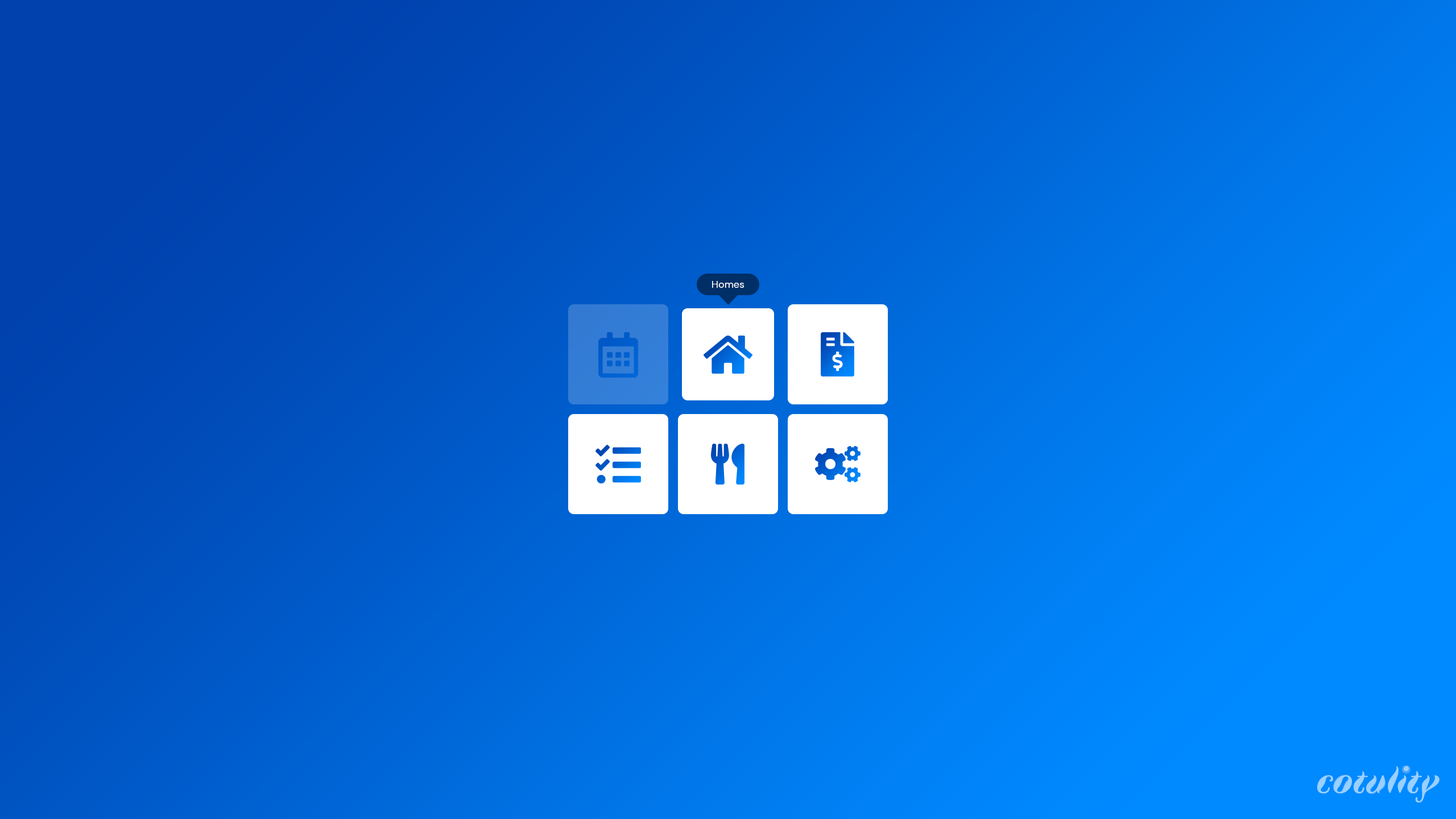
<style>
.page{position:relative;width:1456px;height:819px}
.page>*{position:absolute;margin:0}
.t1{font:10.2px "DMSans-Regular";color:#ffffff}
.t2{font:36.9px "Faune-DisplayBoldItalic";color:#99d0ff}
.t3{font:16.6px "Faune-DisplayBlack"}
</style>
<div class="page">
<p class="t1" style="left:712px;top:281px;width:32px;height:7px">Homes</p>
<p class="t2" style="left:1317px;top:766px;width:122px;height:36px">cotulity</p>
<p class="t3" style="left:1402px;top:765px;width:8px;height:8px;rotate:90deg">o</p>
<p class="t2" style="left:1407px;top:771px;width:14px;height:22px">t</p>
<p class="t2" style="left:1333px;top:775px;width:18px;height:18px">o</p>
<p class="t2" style="left:1367px;top:776px;width:19px;height:18px">u</p>
</div>
